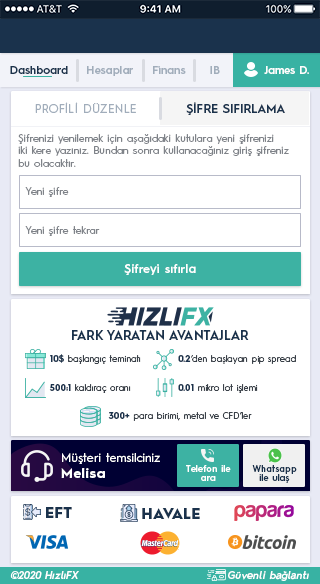
<style>
.page{position:relative;width:320px;height:584px;background:#ffffff}
.page>*{position:absolute;margin:0}
.t1{font:11.1px "HurmeGeometricSans3-SemiBold";color:#1a324c}
.t2{font:11.1px "HurmeGeometricSans3-SemiBold";color:#a1adbb}
.t3{font:11.1px "HurmeGeometricSans3-SemiBold";color:#fefefe}
.t4{font:12px "HurmeGeometricSans1-Regular";letter-spacing:0.01em;color:#a1adbb}
.t5{font:12px "HurmeGeometricSans1-SemiBold";letter-spacing:0.01em;color:#1a324c}
.t6{font:10.2px "HurmeGeometricSans1-Regular";letter-spacing:0.01em;color:#7f8389}
.t7{font:12px "HurmeGeometricSans1-SemiBold";letter-spacing:0.025em;color:#ffffff}
.t8{font:12.8px "HurmeGeometricSans1-SemiBold";color:#1a324c}
.t9{font:9px "HurmeGeometricSans1-Regular";color:#3a4149}
.t10{font:9px "HurmeGeometricSans1-Bold";color:#1a324c}
.t11{font:12px/15.4px "HurmeGeometricSans1-Regular";letter-spacing:0.025em;color:#ffffff}
.t12{font:13.7px/15.4px "HurmeGeometricSans1-Bold";letter-spacing:0.05em;color:#ffffff}
.t13{font:9px/9px "HurmeGeometricSans3-SemiBold";letter-spacing:0.01em;color:#ffffff}
.t14{font:9px/9px "HurmeGeometricSans3-SemiBold";letter-spacing:0.01em;color:#1a324c}
.t15{font:14.5px "HurmeGeometricSans1-Black";letter-spacing:0.025em;color:#1a324c}
.t16{font:10.2px "HurmeGeometricSans2-SemiBoldObl";letter-spacing:0.025em;color:#ffffff}
</style>
<div class="page">
<p class="t1" style="left:10px;top:66px;width:58px;height:8px">Dashboard</p>
<p class="t2" style="left:87px;top:66px;width:46px;height:10px">Hesaplar</p>
<p class="t2" style="left:153px;top:66px;width:33px;height:8px">Finans</p>
<p class="t2" style="left:210px;top:66px;width:10px;height:8px">IB</p>
<p class="t3" style="left:264px;top:66px;width:45px;height:8px">James D.</p>
<p class="t4" style="left:35px;top:102px;width:101px;height:11px">PROFİLİ DÜZENLE</p>
<p class="t5" style="left:186px;top:102px;width:99px;height:13px">ŞİFRE SIFIRLAMA</p>
<p class="t6" style="left:18px;top:134px;width:271px;height:33px">Şifrenizi yenilemek için aşağıdaki kutulara yeni şifrenizi<br>iki kere yazınız. Bundan sonra kullanacağınız giriş şifreniz<br>bu olacaktır.</p>
<p class="t6" style="left:25px;top:187px;width:44px;height:10px">Yeni şifre</p>
<p class="t6" style="left:25px;top:226px;width:75px;height:10px">Yeni şifre tekrar</p>
<p class="t7" style="left:124px;top:264px;width:72px;height:11px">Şifreyi sıfırla</p>
<p class="t8" style="left:72px;top:330px;width:177px;height:10px">FARK YARATAN AVANTAJLAR</p>
<p class="t9" style="left:50px;top:354px;width:91px;height:10px"><span class="t10">10$</span> başlangıç teminatı</p>
<p class="t9" style="left:178px;top:355px;width:118px;height:9px"><span class="t10">0.2</span>‘den başlayan pip spread</p>
<p class="t9" style="left:49px;top:384px;width:82px;height:9px"><span class="t10">500:1</span> kaldıraç oranı</p>
<p class="t9" style="left:178px;top:384px;width:80px;height:9px"><span class="t10">0.01</span> mikro lot işlemi</p>
<p class="t9" style="left:108px;top:412px;width:144px;height:9px"><span class="t10">300+</span> para birimi, metal ve CFD’ler</p>
<p class="t11" style="left:61px;top:453px;width:99px;height:25px">Müşteri temsilciniz<br><span class="t12">Melisa</span></p>
<p class="t13" style="left:186px;top:465px;width:45px;height:16px;text-align:center">Telefon ile<br>ara</p>
<p class="t14" style="left:252px;top:465px;width:45px;height:18px;text-align:center">Whatsapp<br>ile ulaş</p>
<p class="t15" style="left:46px;top:507px;width:26px;height:11px">EFT</p>
<p class="t15" style="left:142px;top:508px;width:58px;height:11px">HAVALE</p>
<p class="t16" style="left:10px;top:571px;width:69px;height:8px">©2020 HızlıFX</p>
<p class="t16" style="left:228px;top:571px;width:81px;height:10px">Güvenli bağlantı</p>
</div>
